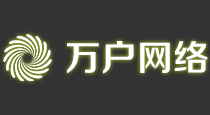
<style>
.page{position:relative;width:210px;height:115px;background:#333333}
.page>*{position:absolute;margin:0}
.t1{font:36px "FZZZHONGJW--GB1-0";color:#ffffff}
</style>
<div class="page">
<p class="t1" style="left:67px;top:41px;width:141px;height:33px">万户网络</p>
</div>
